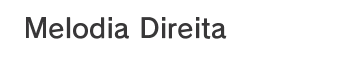
<style>
.page{position:relative;width:342px;height:60px;background:#ffffff}
.page>*{position:absolute;margin:0}
.t1{font:26.7px "RodinPro-DB";letter-spacing:0.008em;color:#383738}
</style>
<div class="page">
<p class="t1" style="left:26px;top:17px;width:201px;height:22px">Melodia Direita</p>
</div>
